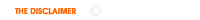
<style>
.page{position:relative;width:200px;height:20px;background:#ffffff}
.page>*{position:absolute;margin:0}
.t1{font:8px "Atlanta-Demi";color:#ff6600}
</style>
<div class="page">
<p class="t1" style="left:15px;top:7px;width:62px;height:8px">THE DISCLAIMER</p>
</div>
